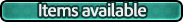
<style>
.page{position:relative;width:183px;height:22px}
.page>*{position:absolute;margin:0}
.t1{font:18px "AdobeClean-Regular";letter-spacing:-0.04em;color:#edeff1;font-weight:bold}
</style>
<div class="page">
<p class="t1" style="left:39px;top:3px;width:107px;height:14px">Items available</p>
</div>
